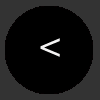
<style>
.page{position:relative;width:100px;height:100px;background:#000000}
.page>*{position:absolute;margin:0}
.t1{font:36px "TwCenMT-Regular";color:#f4f3f3}
</style>
<div class="page">
<p class="t1" style="left:40px;top:38px;width:20px;height:19px">&lt;</p>
</div>
